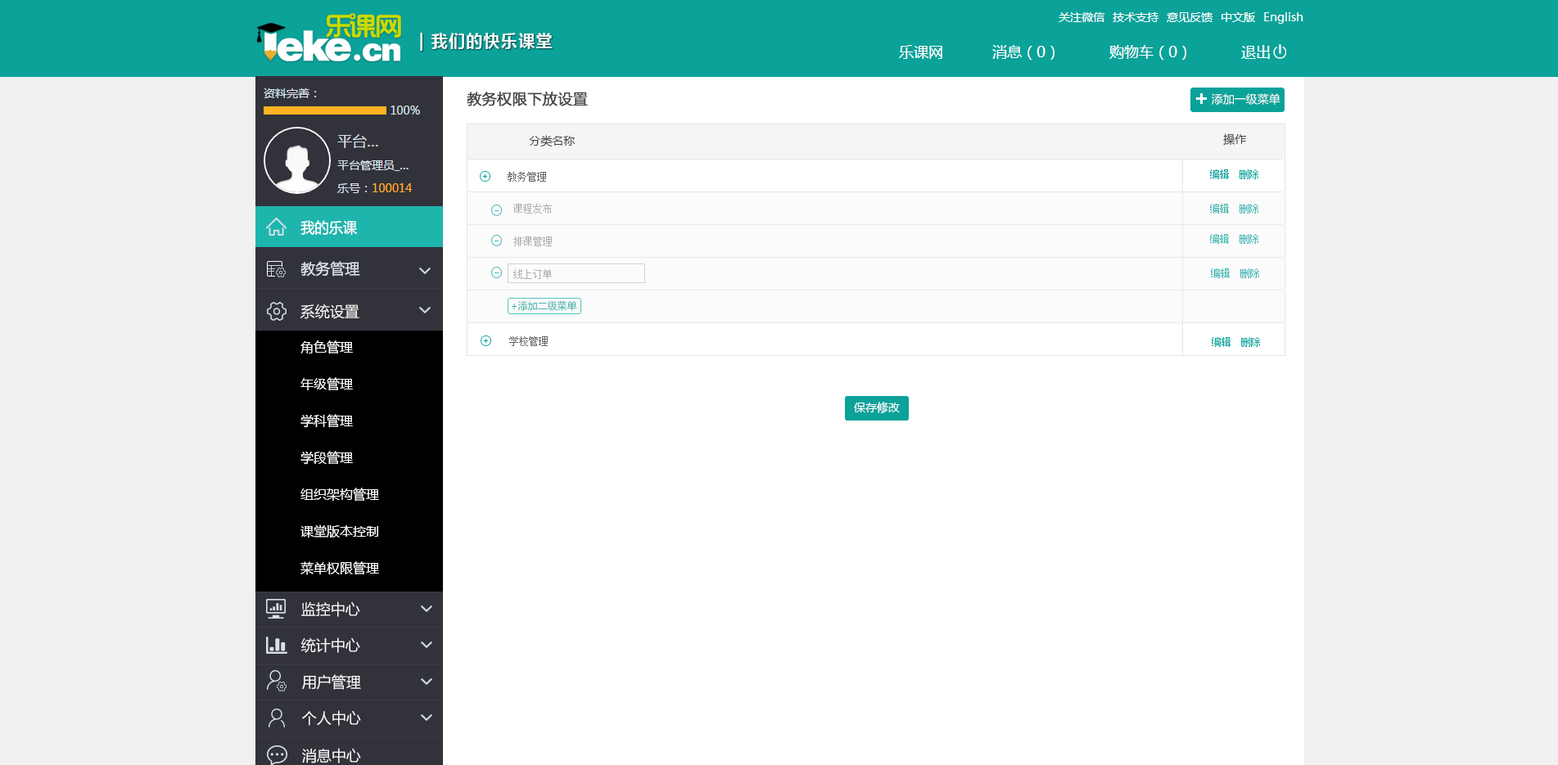
<style>
.page{position:relative;width:1558px;height:765px;background:#ffffff}
.page>*{position:absolute;margin:0}
.t1{font:14.7px "MicrosoftYaHei";color:#444444;font-weight:bold}
.t2{font:11.5px "MicrosoftYaHei";color:#ffffff}
.t3{font:11.5px "MicrosoftYaHei";color:#444444}
.t4{font:9.8px "SimSun";color:#666666}
.t5{font:9.8px "SimSun";color:#0ba29a}
.t6{font:9px "MicrosoftYaHei";color:#0ba299}
.t7{font:9.8px/32.7px "SimSun";color:#999999}
.t8{font:9.8px "SimSun";color:#45b6b0}
.t9{font:14.7px "MicrosoftYaHei";color:#ffffff;scale:0.96 1}
.t10{font:14.7px "MicrosoftYaHei";color:#d9e1e8}
.t11{font:14.7px "MicrosoftYaHei";color:#fafafa}
.t12{font:9.8px "MicrosoftYaHei";color:#45b6af}
.t13{font:13.1px/36.8px "MicrosoftYaHei";color:#ffffff}
</style>
<div class="page">
<p class="t1" style="left:467px;top:92px;width:121px;height:14px">教务权限下放设置</p>
<p class="t2" style="left:1212px;top:93px;width:68px;height:12px">添加一级菜单</p>
<p class="t3" style="left:529px;top:135px;width:46px;height:12px">分类名称</p>
<p class="t3" style="left:1223px;top:133px;width:24px;height:13px">操作</p>
<p class="t4" style="left:508px;top:172px;width:38px;height:10px">教务管理</p>
<p class="t5" style="left:1210px;top:169px;width:48px;height:10px">编辑  删除</p>
<p class="t6" style="left:483px;top:174px;width:4px;height:4px">+</p>
<p class="t7" style="left:513px;top:204px;width:39px;height:75px">课程发布<br>排课管理<br>线上订单</p>
<p class="t8" style="left:1210px;top:204px;width:48px;height:10px">编辑  删除</p>
<p class="t9" style="left:300px;top:220px;width:57px;height:15px">我的乐课</p>
<p class="t8" style="left:1210px;top:234px;width:48px;height:10px">编辑  删除</p>
<p class="t10" style="left:300px;top:261px;width:60px;height:16px">教务管理</p>
<p class="t8" style="left:1211px;top:269px;width:48px;height:9px">编辑  删除</p>
<p class="t11" style="left:300px;top:304px;width:59px;height:15px">系统设置</p>
<p class="t12" style="left:512px;top:300px;width:65px;height:11px">+添加二级菜单</p>
<p class="t13" style="left:300px;top:341px;width:79px;height:235px">角色管理<br>年级管理<br>学科管理<br>学段管理<br>组织架构管理<br>课堂版本控制<br>菜单权限管理</p>
<p class="t6" style="left:484px;top:339px;width:4px;height:4px">+</p>
<p class="t4" style="left:509px;top:336px;width:39px;height:10px">学校管理</p>
<p class="t5" style="left:1212px;top:337px;width:48px;height:10px">编辑  删除</p>
<p class="t2" style="left:854px;top:402px;width:46px;height:12px">保存修改</p>
<p class="t11" style="left:301px;top:602px;width:59px;height:15px">监控中心</p>
<p class="t11" style="left:301px;top:638px;width:59px;height:15px">统计中心</p>
<p class="t11" style="left:302px;top:675px;width:59px;height:15px">用户管理</p>
<p class="t11" style="left:302px;top:711px;width:59px;height:15px">个人中心</p>
<p class="t11" style="left:302px;top:748px;width:59px;height:16px">消息中心</p>
</div>
